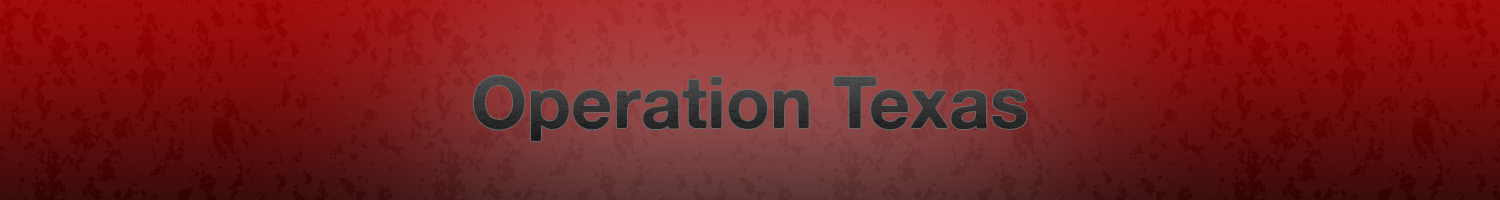
<style>
.page{position:relative;width:1500px;height:200px}
.page>*{position:absolute;margin:0}
.t1{font:72px "AlteHaasGrotesk_Bold";color:#343434}
</style>
<div class="page">
<p class="t1" style="left:473px;top:76px;width:554px;height:66px">Operation Texas</p>
</div>
